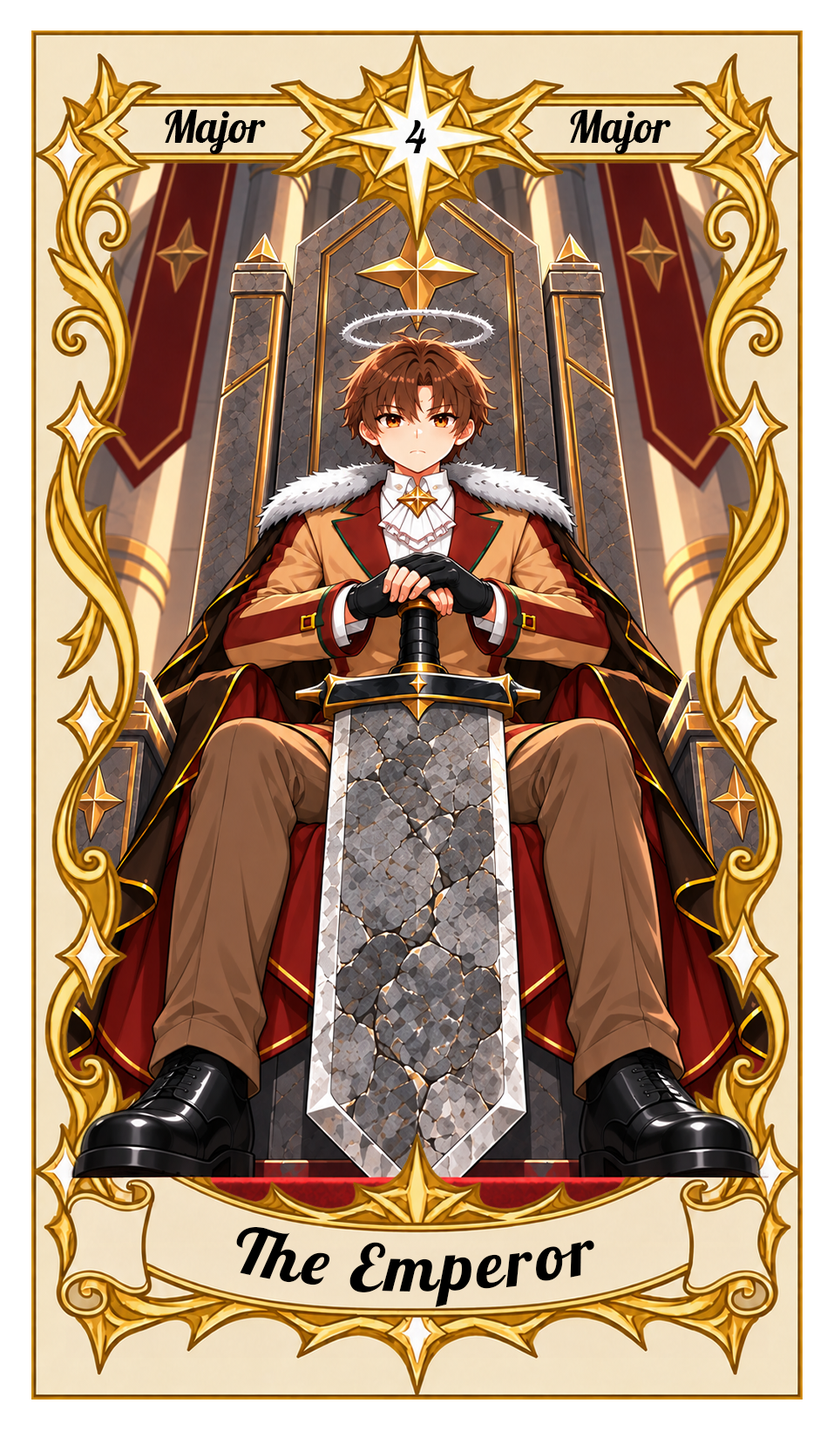
<style>
.page{position:relative;width:834px;height:1430px}
.page>*{position:absolute;margin:0}
.t1{font:43.6px "Lobster-Regular";color:#000000}
.t2{font:65.3px "Lobster-Regular";letter-spacing:0.05em;color:#000000}
</style>
<div class="page">
<p class="t1" style="left:165px;top:110px;width:101px;height:44px">Major</p>
<p class="t1" style="left:570px;top:110px;width:101px;height:44px">Major</p>
<p class="t1" style="left:404px;top:120px;width:22px;height:33px">4</p>
<p class="t2" style="left:236px;top:1227px;width:358px;height:81px">The Emperor</p>
</div>
